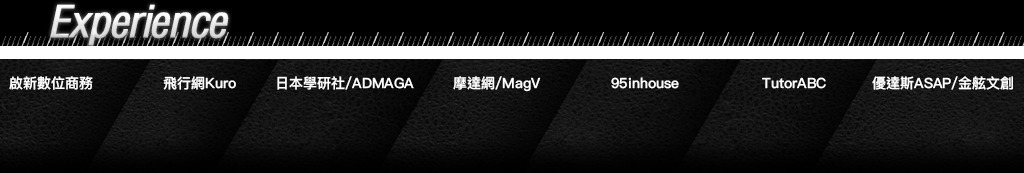
<style>
.page{position:relative;width:1024px;height:173px;background:#000000}
.page>*{position:absolute;margin:0}
.t1{font:14px "PingFangHK-Medium";color:#ffffff}
</style>
<div class="page">
<p class="t1" style="left:9px;top:76px;width:84px;height:14px">啟新數位商務</p>
<p class="t1" style="left:163px;top:76px;width:73px;height:14px">飛行網Kuro</p>
<p class="t1" style="left:277px;top:76px;width:137px;height:14px">日本學研社/ADMAGA</p>
<p class="t1" style="left:453px;top:76px;width:88px;height:16px">摩達網/MagV</p>
<p class="t1" style="left:611px;top:77px;width:68px;height:12px">95inhouse</p>
<p class="t1" style="left:762px;top:77px;width:64px;height:12px">TutorABC</p>
<p class="t1" style="left:872px;top:76px;width:141px;height:14px">優達斯ASAP/金舷文創</p>
</div>
